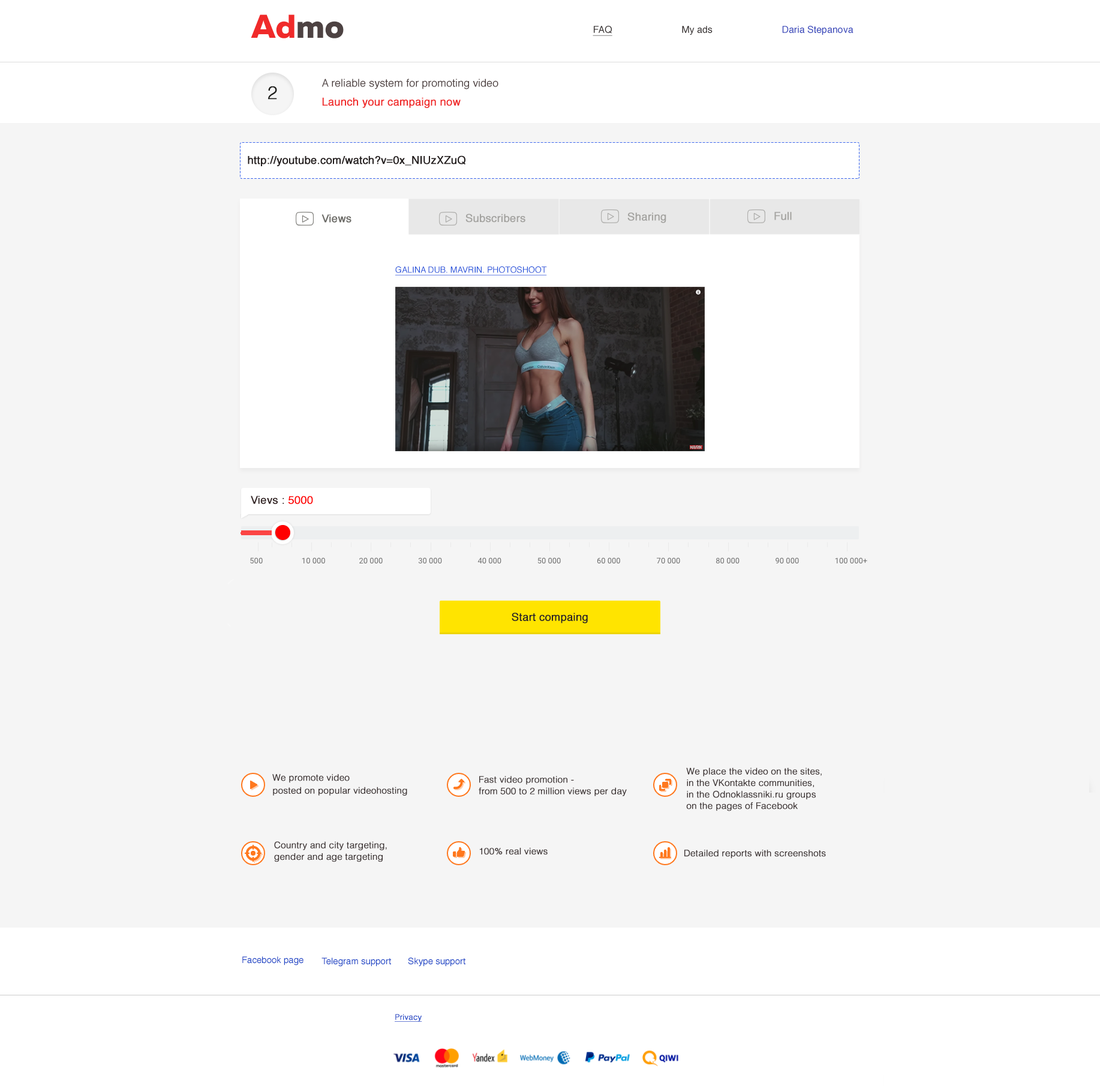
<style>
.page{position:relative;width:1100px;height:1086px;background:#f5f5f5}
.page>*{position:absolute;margin:0}
.t1{font:33px "MullerExtraBold";color:#f02a2a}
.t2{font:33px "MullerExtraBold";color:#4d4242}
.t3{font:9.6px "Helvetica";color:#3444ba}
.t4{font:9.6px "Helvetica";color:#302a2a;text-decoration:underline}
.t5{font:9.6px "Helvetica";color:#302a2a}
.t6{font:18px "Helvetica-Light";color:#1d1d1a;font-weight:bold}
.t7{font:10.8px/1.4px "Helvetica";color:#4b3e3e}
.t8{font:10.8px/1.4px "Helvetica";color:#f02a2a;font-weight:bold}
.t9{font:10.7px "Helvetica";color:#6c6b67;font-weight:bold}
.t10{font:10.7px "Helvetica";color:#a4a3a0;font-weight:bold}
.t11{font:8.4px "Helvetica";color:#1d4eda;text-decoration:underline}
.t12{font:10.8px "Helvetica";color:#332424;font-weight:bold}
.t13{font:10.8px "Helvetica";color:#ff0202;font-weight:bold}
.t14{font:10.8px "Helvetica";color:#2a2424;font-weight:bold}
.t15{font:9px/1.4px "Helvetica-Light";color:#3e3535;font-weight:bold}
.t16{font:9px "Helvetica-Light";color:#3e3535;font-weight:bold}
.t17{font:9px "Helvetica";color:#1e46c6}
.t18{font:7.8px "Helvetica-Light";color:#1e46c6;font-weight:bold;text-decoration:underline}
</style>
<div class="page">
<p class="t1" style="left:251px;top:14px;width:93px;height:24px">Ad<span class="t2">mo</span></p>
<p class="t3" style="left:593px;top:26px;width:261px;height:10px"><span class="t4">FAQ</span><span class="t5">                          My ads                          </span>Daria Stepanova</p>
<p class="t6" style="left:268px;top:86px;width:9px;height:14px">2</p>
<p class="t7" style="left:322px;top:79px;width:177px;height:29px">A reliable system for promoting video<br><br><br><br><br><br><br><br><br><br><br><br><br><span class="t8">Launch your campaign now</span></p>
<p class="t9" style="left:322px;top:214px;width:30px;height:9px">Views</p>
<p class="t10" style="left:466px;top:214px;width:60px;height:9px">Subscribers</p>
<p class="t10" style="left:628px;top:212px;width:39px;height:11px">Sharing</p>
<p class="t10" style="left:775px;top:212px;width:17px;height:8px">Full</p>
<p class="t11" style="left:395px;top:266px;width:152px;height:9px">GALINA DUB. MAVRIN. PHOTOSHOOT</p>
<p class="t12" style="left:251px;top:496px;width:62px;height:8px">Vievs : <span class="t13">5000</span></p>
<p class="t14" style="left:512px;top:613px;width:76px;height:10px">Start compaing</p>
<p class="t15" style="left:272px;top:774px;width:135px;height:22px">We promote video <br><br><br><br><br><br><br><br><br>posted on popular videohosting</p>
<p class="t15" style="left:686px;top:767px;width:136px;height:44px">We place the video on the sites, <br><br><br><br><br><br><br><br>in the VKontakte communities, <br><br><br><br><br><br><br><br>in the Odnoklassniki.ru groups <br><br><br><br><br><br><br><br>on the pages of Facebook</p>
<p class="t15" style="left:479px;top:776px;width:148px;height:20px">Fast video promotion - <br><br><br><br><br><br><br><br>from 500 to 2 million views per day</p>
<p class="t15" style="left:274px;top:841px;width:113px;height:21px">Country and city targeting, <br><br><br><br><br><br><br><br>gender and age targeting</p>
<p class="t16" style="left:479px;top:848px;width:69px;height:7px">100% real views</p>
<p class="t16" style="left:685px;top:850px;width:141px;height:9px">Detailed reports with screenshots</p>
<p class="t17" style="left:242px;top:956px;width:62px;height:9px">Facebook page</p>
<p class="t17" style="left:322px;top:958px;width:69px;height:9px">Telegram support</p>
<p class="t17" style="left:408px;top:958px;width:58px;height:9px">Skype support</p>
<p class="t18" style="left:395px;top:1014px;width:27px;height:8px">Privacy</p>
</div>
